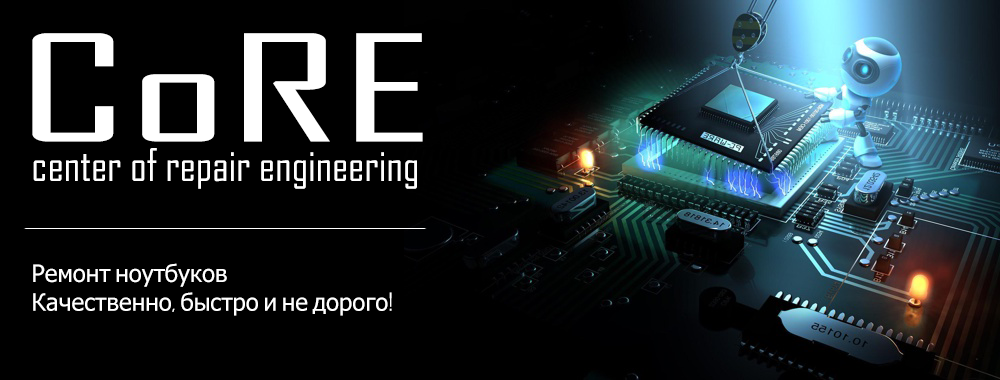
<style>
.page{position:relative;width:1000px;height:380px;background:#000000}
.page>*{position:absolute;margin:0}
.t1{font:141.3px "AgencyFB-Reg";color:#ffffff;scale:1.86 1}
.t2{font:43.4px "AgencyFB-Reg";color:#ffffff}
.t3{font:24px "Tahoma";color:#ffffff}
.t4{font:24px "AgencyFB-Reg";color:#ffffff}
</style>
<div class="page">
<p class="t1" style="left:32px;top:33px;width:391px;height:109px">CoRE</p>
<p class="t2" style="left:33px;top:148px;width:384px;height:41px">center of repair engineering</p>
<p class="t3" style="left:33px;top:263px;width:359px;height:53px">Ремонт ноутбуков<br>Качественно<span class="t4">, </span>быстро и не дорого<span class="t4">!</span></p>
</div>
